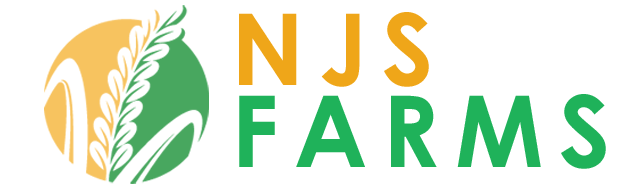
<style>
.page{position:relative;width:626px;height:189px;background:#ffffff}
.page>*{position:absolute;margin:0}
.t1{font:99.3px/81.2px "CenturyGothic-Bold";letter-spacing:0.15em;color:#1fb25a;text-transform:uppercase}
.t2{font:99.3px/81.2px "CenturyGothic-Bold";letter-spacing:0.15em;color:#efa619;text-transform:uppercase}
</style>
<div class="page">
<p class="t1" style="left:239px;top:12px;width:367px;height:157px"><span class="t2">NJS<br></span>FARMS</p>
</div>
